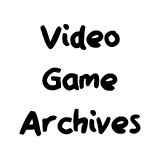
<style>
.page{position:relative;width:160px;height:160px;background:#ffffff}
.page>*{position:absolute;margin:0}
.t1{font:35.9px "QAReports";color:#000000}
</style>
<div class="page">
<p class="t1" style="left:19px;top:24px;width:122px;height:113px;text-align:center">Video<br>Game<br>Archives</p>
</div>
